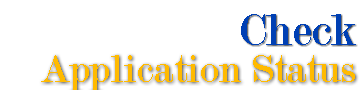
<style>
.page{position:relative;width:363px;height:90px;background:#ffffff}
.page>*{position:absolute;margin:0}
.t1{font:48px "Modern-Regular";color:#0040b4}
.t2{font:42px "Modern-Regular";color:#ffba00}
</style>
<div class="page">
<p class="t1" style="left:241px;top:14px;width:115px;height:31px">Check</p>
<p class="t2" style="left:41px;top:55px;width:314px;height:36px">Application Status</p>
</div>
